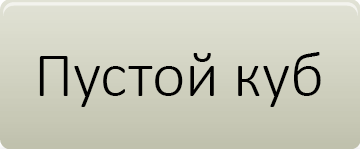
<style>
.page{position:relative;width:360px;height:149px}
.page>*{position:absolute;margin:0}
.t1{font:64px "Calibri-Light";color:#000000}
</style>
<div class="page">
<p class="t1" style="left:39px;top:52px;width:282px;height:55px">Пустой куб</p>
</div>
